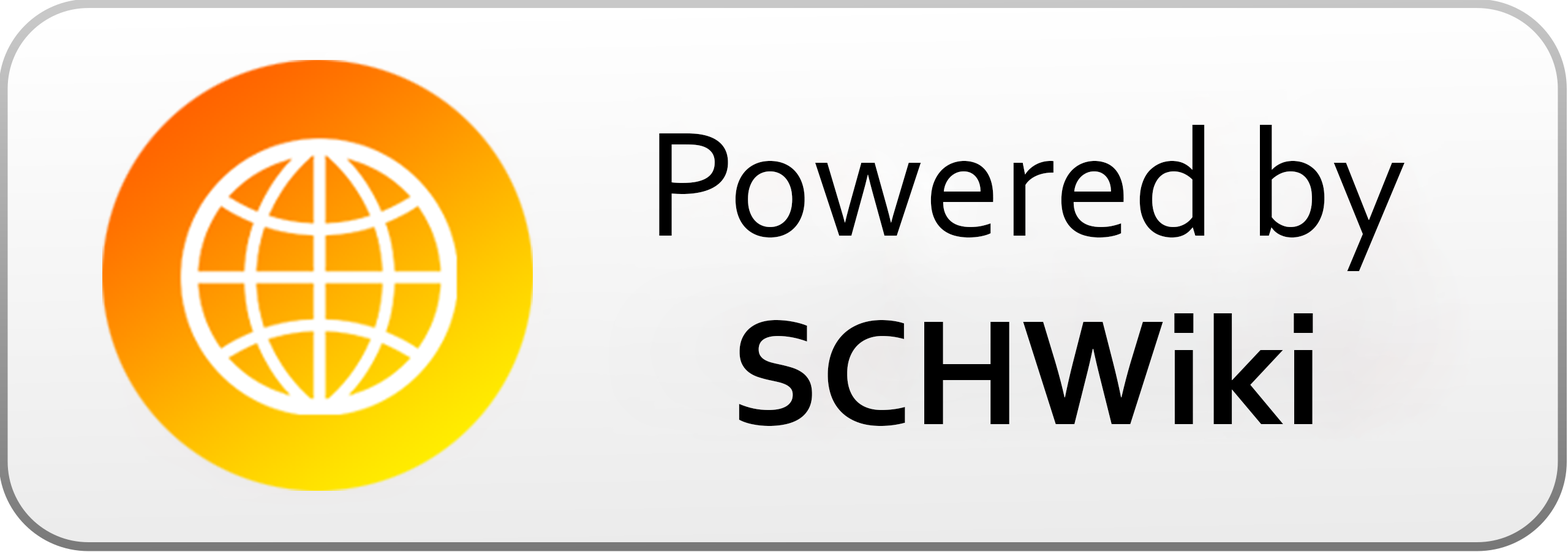
<style>
.page{position:relative;width:1568px;height:552px}
.page>*{position:absolute;margin:0}
.t1{font:156.8px "Corbel";color:#000000}
.t2{font:156.8px "Corbel-Bold";color:#000000}
</style>
<div class="page">
<p class="t1" style="left:659px;top:124px;width:745px;height:302px;text-align:center">Powered by<br><span class="t2">SCHWiki</span></p>
</div>
